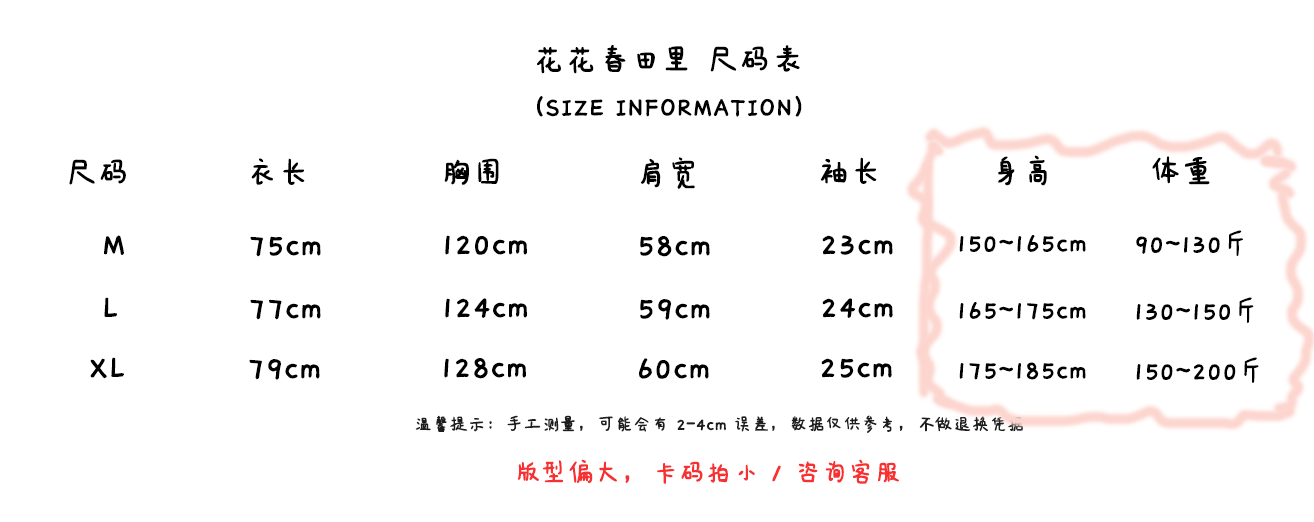
<style>
.page{position:relative;width:1314px;height:522px;background:#ffffff}
.page>*{position:absolute;margin:0}
.t1{font:36px "IdeaFonts-QianXiaTi";color:#000000;font-weight:bold}
.t2{font:30px "IdeaFonts-QianXiaTi";color:#000000;font-weight:bold}
.t3{font:20px "IdeaFonts-QianXiaTi";color:#1e1d1d;font-weight:bold}
.t4{font:30px "IdeaFonts-QianXiaTi";color:#f73131;font-weight:bold}
</style>
<div class="page">
<p class="t1" style="left:537px;top:44px;width:263px;height:30px">花花春田里 尺码表</p>
<p class="t2" style="left:537px;top:95px;width:265px;height:22px">（SIZE INFORMATION）</p>
<p class="t1" style="left:69px;top:159px;width:57px;height:26px">尺码</p>
<p class="t1" style="left:251px;top:158px;width:54px;height:27px">衣长</p>
<p class="t1" style="left:444px;top:158px;width:55px;height:27px">胸围</p>
<p class="t1" style="left:641px;top:157px;width:54px;height:32px">肩宽</p>
<p class="t1" style="left:820px;top:157px;width:57px;height:27px">袖长</p>
<p class="t1" style="left:998px;top:155px;width:49px;height:31px">身高</p>
<p class="t1" style="left:1152px;top:156px;width:58px;height:29px">体重</p>
<p class="t2" style="left:1136px;top:230px;width:107px;height:26px">90~130斤</p>
<p class="t1" style="left:104px;top:235px;width:20px;height:20px">M</p>
<p class="t1" style="left:250px;top:236px;width:71px;height:21px">75cm</p>
<p class="t1" style="left:445px;top:235px;width:82px;height:20px">120cm</p>
<p class="t1" style="left:640px;top:236px;width:70px;height:21px">58cm</p>
<p class="t1" style="left:822px;top:235px;width:71px;height:20px">23cm</p>
<p class="t2" style="left:959px;top:235px;width:127px;height:17px">150~165cm</p>
<p class="t1" style="left:104px;top:297px;width:14px;height:20px">L</p>
<p class="t1" style="left:250px;top:299px;width:71px;height:21px">77cm</p>
<p class="t1" style="left:445px;top:298px;width:82px;height:20px">124cm</p>
<p class="t1" style="left:640px;top:299px;width:70px;height:21px">59cm</p>
<p class="t1" style="left:822px;top:298px;width:71px;height:20px">24cm</p>
<p class="t2" style="left:959px;top:302px;width:127px;height:18px">165~175cm</p>
<p class="t2" style="left:1136px;top:297px;width:118px;height:26px">130~150斤</p>
<p class="t1" style="left:90px;top:357px;width:34px;height:22px">XL</p>
<p class="t1" style="left:249px;top:359px;width:71px;height:21px">79cm</p>
<p class="t1" style="left:444px;top:358px;width:82px;height:21px">128cm</p>
<p class="t1" style="left:639px;top:358px;width:70px;height:21px">60cm</p>
<p class="t1" style="left:821px;top:358px;width:71px;height:20px">25cm</p>
<p class="t2" style="left:959px;top:362px;width:127px;height:18px">175~185cm</p>
<p class="t2" style="left:1136px;top:357px;width:123px;height:26px">150~200斤</p>
<p class="t3" style="left:415px;top:415px;width:608px;height:18px">温馨提示：手工测量，可能会有 2-4cm 误差，数据仅供参考，不做退换凭据</p>
<p class="t4" style="left:517px;top:459px;width:382px;height:25px">版型偏大，卡码拍小 / 咨询客服</p>
</div>
